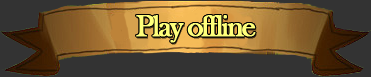
<style>
.page{position:relative;width:371px;height:77px;background:#333333}
.page>*{position:absolute;margin:0}
.t1{font:31px "BaskOldFace";letter-spacing:-0.08em;color:#ffff7b;font-weight:bold}
</style>
<div class="page">
<p class="t1" style="left:136px;top:15px;width:120px;height:28px">Play offline</p>
<p class="t1" style="left:136px;top:15px;width:120px;height:28px">Play offline</p>
</div>
